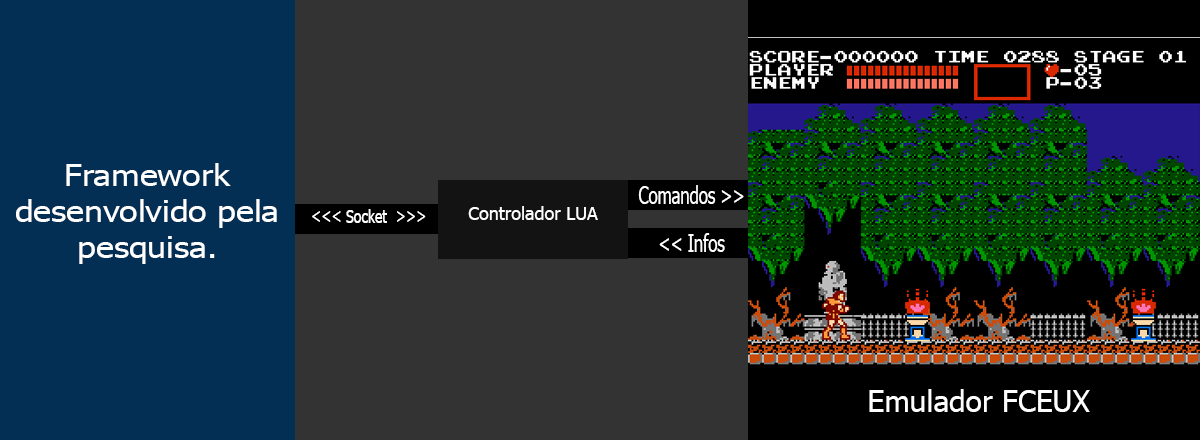
<style>
.page{position:relative;width:1200px;height:440px;background:#333333}
.page>*{position:absolute;margin:0}
.t1{font:30px "Tahoma";color:#ffffff;scale:1.13 1}
.t2{font:24px "Tahoma";color:#ffffff;scale:0.69 1}
.t3{font:18px "Tahoma";color:#ffffff;scale:0.78 1}
.t4{font:18px "Tahoma";color:#ffffff}
.t5{font:30px "Tahoma";color:#ffffff}
</style>
<div class="page">
<p class="t1" style="left:16px;top:163px;width:261px;height:101px;text-align:center">Framework desenvolvido pela pesquisa.</p>
<p class="t2" style="left:638px;top:185px;width:106px;height:19px">Comandos &gt;&gt;</p>
<p class="t3" style="left:312px;top:209px;width:114px;height:14px">&lt;&lt;&lt; Socket  &gt;&gt;&gt;</p>
<p class="t4" style="left:468px;top:206px;width:130px;height:14px">Controlador LUA</p>
<p class="t2" style="left:659px;top:233px;width:66px;height:19px">&lt;&lt; Infos</p>
<p class="t5" style="left:869px;top:389px;width:221px;height:23px">Emulador FCEUX</p>
</div>
